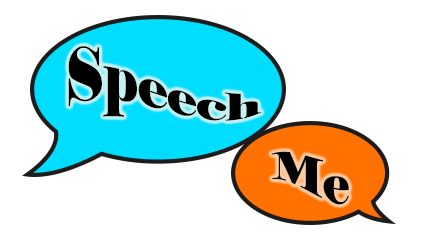
<style>
.page{position:relative;width:422px;height:247px;background:#ffffff}
.page>*{position:absolute;margin:0}
.t1{font:55px "Elephant-Regular";color:#000000}
.t2{font:48px "Elephant-Regular";color:#000000}
</style>
<div class="page">
<p class="t1" style="left:68px;top:46px;width:194px;height:75px">Speech</p>
<p class="t2" style="left:271px;top:151px;width:78px;height:54px">Me</p>
</div>
